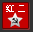
<style>
.page{position:relative;width:33px;height:32px;background:#c50000}
.page>*{position:absolute;margin:0}
.t1{font:10.4px "SimSun";color:#ffffff}
</style>
<div class="page">
<p class="t1" style="left:6px;top:5px;width:19px;height:7px">红二</p>
</div>
